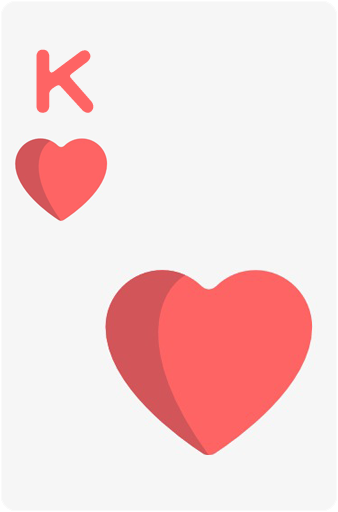
<style>
.page{position:relative;width:338px;height:512px;background:#f6f6f6}
.page>*{position:absolute;margin:0}
.t1{font:72px "JPTY";letter-spacing:0.075em;color:#fe6464}
</style>
<div class="page">
<p class="t1" style="left:36px;top:49px;width:58px;height:64px">K</p>
</div>
